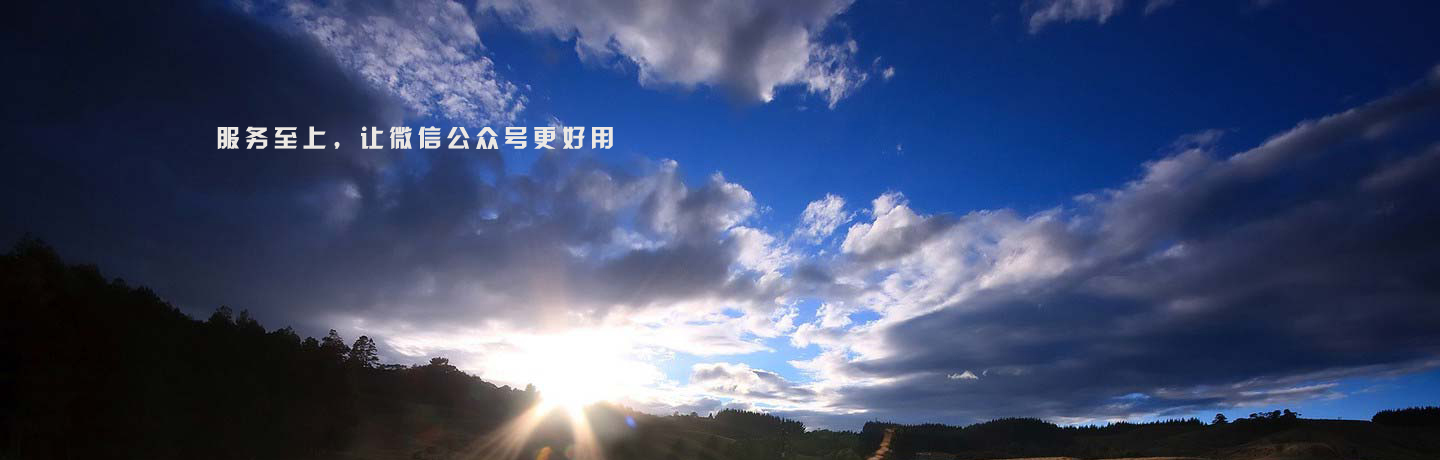
<style>
.page{position:relative;width:1440px;height:460px}
.page>*{position:absolute;margin:0}
.t1{font:24px "HYk2gj";letter-spacing:0.2em;color:#ece8e3}
</style>
<div class="page">
<p class="t1" style="left:217px;top:126px;width:396px;height:24px">服务至上，让微信公众号更好用</p>
</div>
